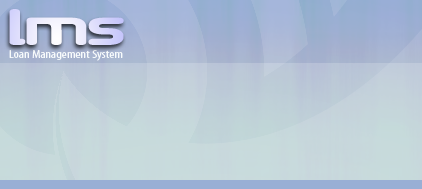
<style>
.page{position:relative;width:422px;height:189px}
.page>*{position:absolute;margin:0}
.t1{font:43.2px "AirstripFour";letter-spacing:-0.075em;color:#e4e3fd;scale:1.67 1}
.t2{font:11.2px "MyriadPro-Cond";color:#f8fbfc;scale:1.25 1}
</style>
<div class="page">
<p class="t1" style="left:9px;top:9px;width:115px;height:36px">LMS</p>
<p class="t2" style="left:9px;top:50px;width:114px;height:11px">Loan Management System</p>
</div>
